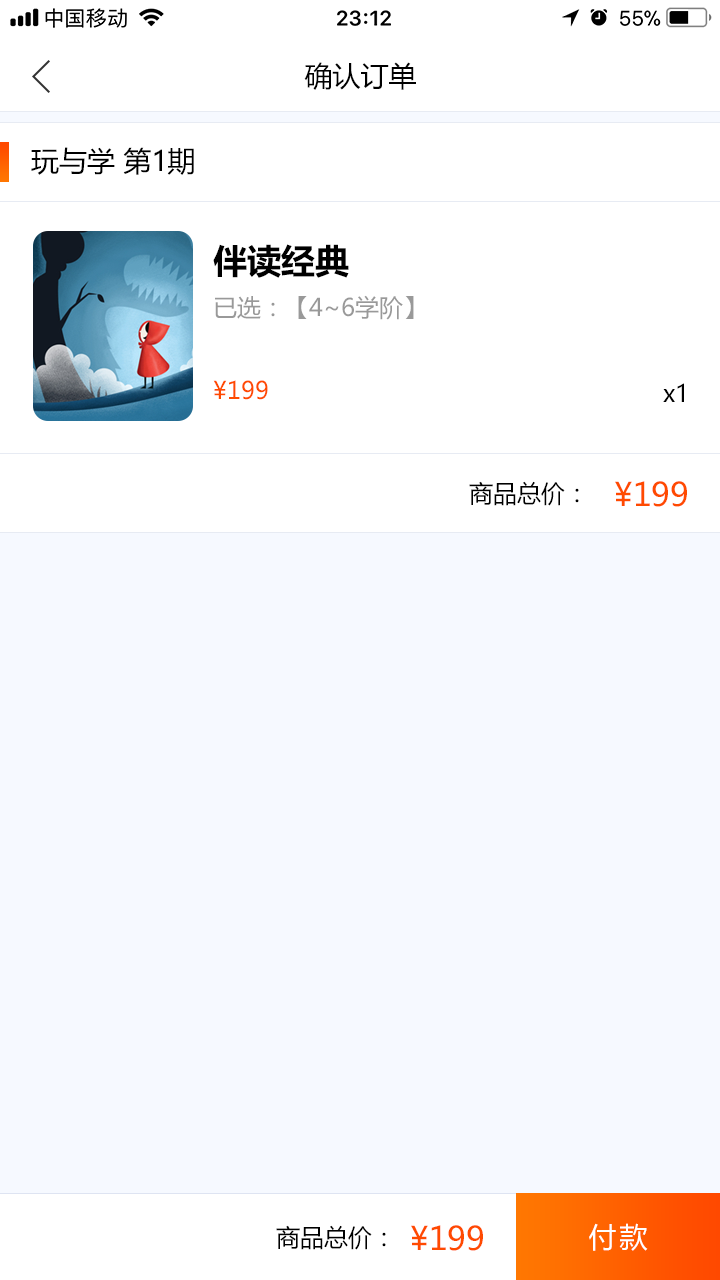
<style>
.page{position:relative;width:720px;height:1280px;background:#f6f9ff}
.page>*{position:absolute;margin:0}
.t1{font:28px "MicrosoftYaHei";color:#000000}
.t2{font:34px "MicrosoftYaHei-Bold";color:#000000}
.t3{font:24px "MicrosoftYaHei";color:#999999}
.t4{font:24px "MicrosoftYaHei";color:#ff4a00}
.t5{font:24px "MicrosoftYaHei";color:#000000}
.t6{font:32px "MicrosoftYaHei";color:#ff4a00}
.t7{font:28px "MicrosoftYaHei";letter-spacing:0.1em;color:#ffffff}
</style>
<div class="page">
<p class="t1" style="left:304px;top:62px;width:112px;height:28px">确认订单</p>
<p class="t1" style="left:31px;top:147px;width:163px;height:28px">玩与学 第1期</p>
<p class="t2" style="left:213px;top:244px;width:136px;height:34px">伴读经典</p>
<p class="t3" style="left:215px;top:295px;width:199px;height:25px">已选：【4~6学阶】</p>
<p class="t4" style="left:213px;top:380px;width:55px;height:20px">¥199</p>
<p class="t5" style="left:663px;top:383px;width:21px;height:19px">x1</p>
<p class="t5" style="left:469px;top:481px;width:110px;height:25px">商品总价：</p>
<p class="t6" style="left:615px;top:481px;width:72px;height:26px">¥199</p>
<p class="t5" style="left:276px;top:1225px;width:110px;height:25px">商品总价：</p>
<p class="t6" style="left:411px;top:1225px;width:72px;height:26px">¥199</p>
<p class="t7" style="left:589px;top:1223px;width:59px;height:28px">付款</p>
</div>
